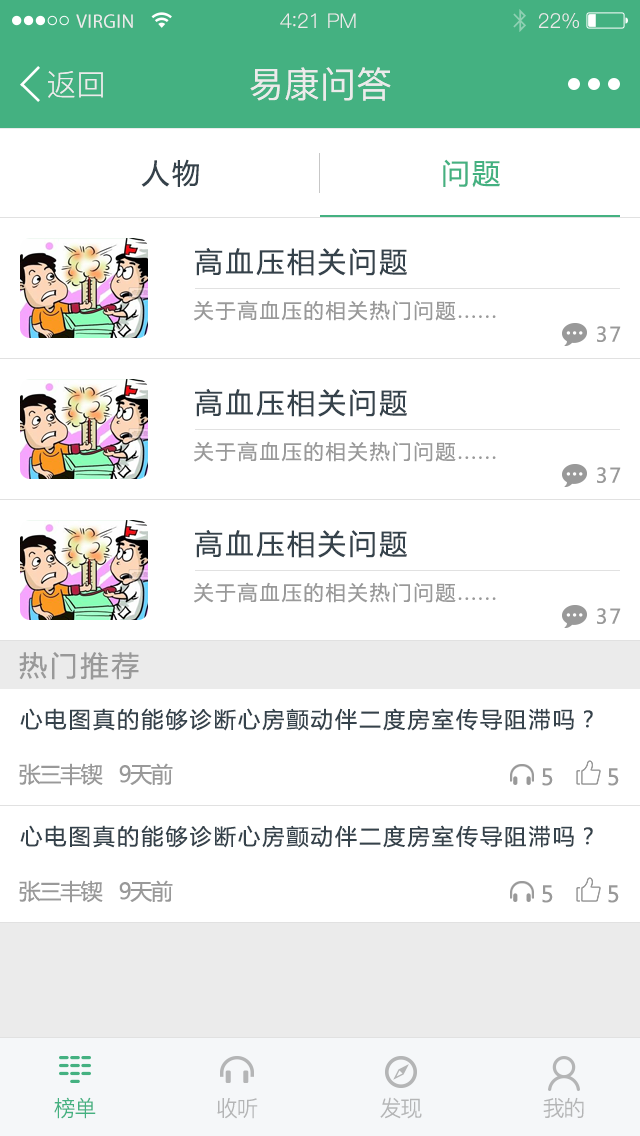
<style>
.page{position:relative;width:640px;height:1136px;background:#ffffff}
.page>*{position:absolute;margin:0}
.t1{font:19.6px "MyriadPro-Regular";letter-spacing:0.02em;color:#ebebeb}
.t2{font:20.4px "PingFang-SC-Regular";letter-spacing:-0.02em;color:#ebebeb}
.t3{font:22.1px "PingFang-SC-Regular";letter-spacing:-0.02em;color:#ebebeb}
.t4{font:30px "PingFang-SC-Regular";color:#ebebeb}
.t5{font:36px "PingFang-SC-Medium";color:#ebebeb}
.t6{font:28px "MicrosoftYaHei";letter-spacing:0.1em;color:#35424b}
.t7{font:28px "MicrosoftYaHei";letter-spacing:0.1em;color:#44b181}
.t8{font:20px "MicrosoftYaHei";letter-spacing:0.1em;color:#999999}
.t9{font:28px "MicrosoftYaHei";letter-spacing:0.1em;color:#999999}
.t10{font:22px "MicrosoftYaHei";letter-spacing:0.1em;color:#35424b}
.t11{font:22px "MicrosoftYaHei";letter-spacing:-0.06em;color:#999999}
.t12{font:22px "PingFang-SC-Regular";letter-spacing:-0.06em;color:#44b181}
.t13{font:22px "PingFang-SC-Regular";letter-spacing:-0.06em;color:#b4b5b6}
</style>
<div class="page">
<p class="t1" style="left:76px;top:14px;width:57px;height:14px">VIRGIN</p>
<p class="t2" style="left:280px;top:13px;width:76px;height:15px">4<span class="t3">:</span>21 PM</p>
<p class="t2" style="left:539px;top:13px;width:40px;height:16px">22%</p>
<p class="t4" style="left:48px;top:71px;width:55px;height:27px">返回</p>
<p class="t5" style="left:250px;top:67px;width:141px;height:34px">易康问答</p>
<p class="t6" style="left:141px;top:159px;width:58px;height:28px">人物</p>
<p class="t7" style="left:443px;top:159px;width:57px;height:29px">问题</p>
<p class="t6" style="left:195px;top:248px;width:212px;height:28px">高血压相关问题</p>
<p class="t8" style="left:194px;top:300px;width:302px;height:21px">关于高血压的相关热门问题......</p>
<p class="t8" style="left:597px;top:326px;width:24px;height:16px">37</p>
<p class="t6" style="left:195px;top:389px;width:212px;height:28px">高血压相关问题</p>
<p class="t8" style="left:194px;top:441px;width:302px;height:21px">关于高血压的相关热门问题......</p>
<p class="t8" style="left:597px;top:467px;width:24px;height:16px">37</p>
<p class="t6" style="left:195px;top:530px;width:212px;height:28px">高血压相关问题</p>
<p class="t8" style="left:194px;top:582px;width:302px;height:21px">关于高血压的相关热门问题......</p>
<p class="t8" style="left:597px;top:608px;width:24px;height:16px">37</p>
<p class="t9" style="left:19px;top:652px;width:120px;height:28px">热门推荐</p>
<p class="t10" style="left:20px;top:708px;width:573px;height:23px">心电图真的能够诊断心房颤动伴二度房室传导阻滞吗？</p>
<p class="t11" style="left:19px;top:763px;width:84px;height:23px">张三丰锲</p>
<p class="t11" style="left:119px;top:763px;width:54px;height:22px">9天前</p>
<p class="t11" style="left:542px;top:768px;width:11px;height:18px">5</p>
<p class="t11" style="left:608px;top:768px;width:11px;height:18px">5</p>
<p class="t10" style="left:20px;top:825px;width:573px;height:23px">心电图真的能够诊断心房颤动伴二度房室传导阻滞吗？</p>
<p class="t11" style="left:19px;top:880px;width:84px;height:23px">张三丰锲</p>
<p class="t11" style="left:119px;top:880px;width:54px;height:22px">9天前</p>
<p class="t11" style="left:542px;top:885px;width:11px;height:18px">5</p>
<p class="t11" style="left:608px;top:885px;width:11px;height:18px">5</p>
<p class="t12" style="left:54px;top:1097px;width:42px;height:22px">榜单</p>
<p class="t13" style="left:380px;top:1097px;width:42px;height:22px">发现</p>
<p class="t13" style="left:543px;top:1097px;width:41px;height:21px">我的</p>
<p class="t13" style="left:217px;top:1098px;width:41px;height:21px">收听</p>
</div>
